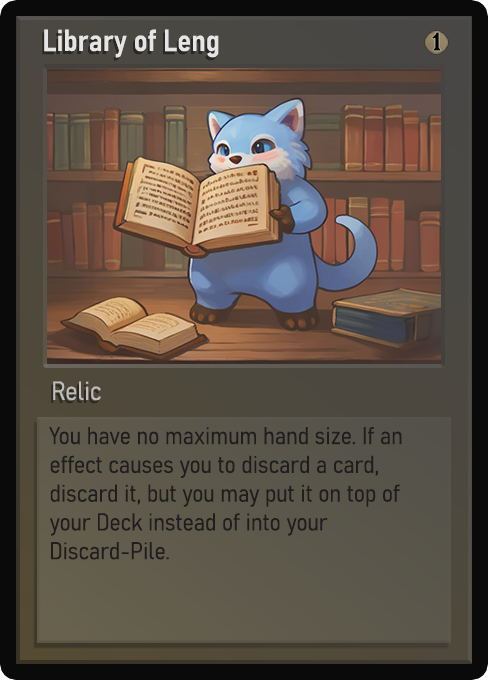
<style>
.page{position:relative;width:488px;height:680px}
.page>*{position:absolute;margin:0}
.t1{font:30px "Bahnschrift-SemiBoldSemiCondensed";color:#f2f2f2;font-weight:bold}
.t2{font:25px "WTRRoycroft";color:#000000;font-weight:bold;scale:1.09 1}
.t3{font:26px "Bahnschrift-LightSemiCondensed";color:#c8c8c8;font-weight:bold}
.t4{font:24px "Bahnschrift-LightSemiCondensed";color:#1e1e1e;font-weight:bold}
</style>
<div class="page">
<p class="t1" style="left:44px;top:29px;width:175px;height:29px;opacity:0.9">Library of Leng</p>
<p class="t2" style="left:432px;top:32px;width:9px;height:19px">1</p>
<p class="t3" style="left:53px;top:381px;width:48px;height:20px;opacity:0.9">Relic</p>
<p class="t4" style="left:49px;top:427px;width:353px;height:133px">You have no maximum hand size. If an effect causes you to discard a card, discard it, but you may put it on top of your Deck instead of into your Discard-Pile.</p>
</div>
